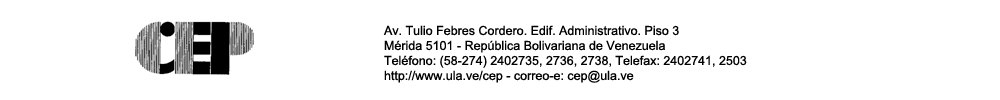
<style>
.page{position:relative;width:1000px;height:100px;background:#ffffff}
.page>*{position:absolute;margin:0}
.t1{font:12.5px "ArialMT";color:#000000}
</style>
<div class="page">
<p class="t1" style="left:383px;top:25px;width:364px;height:58px">Av. Tulio Febres Cordero. Edif. Administrativo. Piso 3<br>Mérida 5101 - República Bolivariana de Venezuela<br>Teléfono: (58-274) 2402735, 2736, 2738, Telefax: 2402741, 2503<br>http://www.ula.ve/cep - correo-e: cep@ula.ve</p>
</div>
